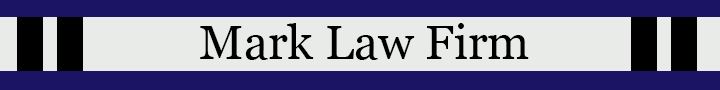
<style>
.page{position:relative;width:720px;height:90px;background:#e8ebe7}
.page>*{position:absolute;margin:0}
.t1{font:48px "Georgia";color:#000000}
</style>
<div class="page">
<p class="t1" style="left:200px;top:23px;width:329px;height:37px">Mark Law Firm</p>
</div>
